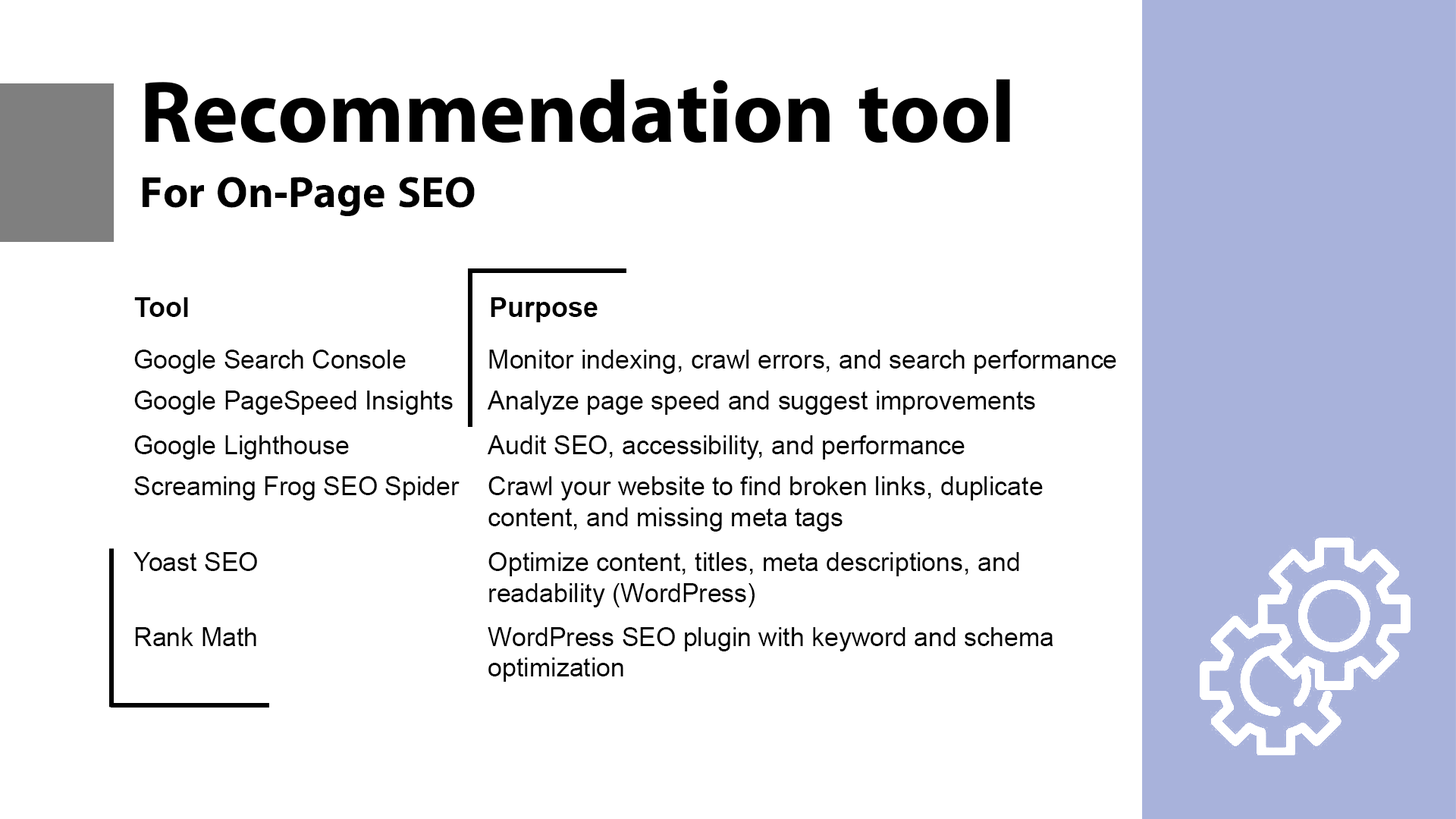
<style>
.page{position:relative;width:1456px;height:819px;background:#ffffff}
.page>*{position:absolute;margin:0}
.t1{font:88px "iKampuchea001_O'Chrov";color:#000000}
.t2{font:44.1px "iKampuchea001_O'Chrov";color:#000000}
.t3{font:27.3px "Arial-BoldMT";color:#000000}
.t4{font:27.2px "Arial-BoldMT";color:#000000}
.t5{font:25.8px "ArialMT";color:#000000}
.t6{font:25.7px "ArialMT";color:#000000}
</style>
<div class="page">
<p class="t1" style="left:145px;top:79px;width:865px;height:64px">Recommendation tool</p>
<p class="t2" style="left:143px;top:177px;width:332px;height:39px">For On-Page SEO</p>
<p class="t3" style="left:134px;top:297px;width:54px;height:20px">Tool</p>
<p class="t4" style="left:491px;top:297px;width:107px;height:25px">Purpose</p>
<p class="t5" style="left:134px;top:350px;width:272px;height:24px">Google Search Console</p>
<p class="t6" style="left:489px;top:350px;width:627px;height:24px">Monitor indexing, crawl errors, and search performance</p>
<p class="t5" style="left:134px;top:391px;width:319px;height:24px">Google PageSpeed Insights</p>
<p class="t6" style="left:487px;top:391px;width:548px;height:24px">Analyze page speed and suggest improvements</p>
<p class="t5" style="left:134px;top:435px;width:215px;height:25px">Google Lighthouse</p>
<p class="t6" style="left:487px;top:435px;width:478px;height:25px">Audit SEO, accessibility, and performance</p>
<p class="t5" style="left:134px;top:476px;width:326px;height:24px">Screaming Frog SEO Spider</p>
<p class="t6" style="left:488px;top:476px;width:555px;height:56px">Crawl your website to find broken links, duplicate <br>content, and missing meta tags</p>
<p class="t5" style="left:133px;top:552px;width:124px;height:19px">Yoast SEO</p>
<p class="t6" style="left:488px;top:552px;width:531px;height:55px">Optimize content, titles, meta descriptions, and <br>readability (WordPress)</p>
<p class="t5" style="left:135px;top:627px;width:121px;height:19px">Rank Math</p>
<p class="t6" style="left:488px;top:627px;width:565px;height:55px">WordPress SEO plugin with keyword and schema <br>optimization</p>
</div>
